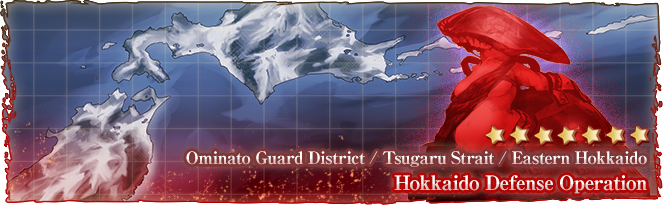
<style>
.page{position:relative;width:663px;height:205px}
.page>*{position:absolute;margin:0}
.t1{font:17px "RyuminPro-ExBold";letter-spacing:-0.04em}
.t2{font:20px "RyuminPro-ExBold";letter-spacing:-0.04em}
</style>
<div class="page">
<p class="t1" style="left:186px;top:151px;width:461px;height:16px">Ominato Guard District / Tsugaru Strait / Eastern Hokkaido</p>
<p class="t2" style="left:394px;top:175px;width:253px;height:19px">Hokkaido Defense Operation</p>
</div>
